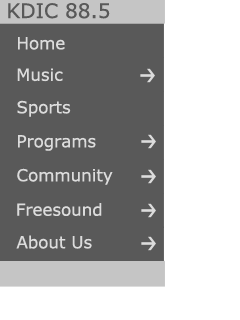
<style>
.page{position:relative;width:240px;height:320px;background:#595959}
.page>*{position:absolute;margin:0}
.t1{font:20px "Verdana";color:#595959}
.t2{font:16.7px "Verdana";color:#dcdcdc}
</style>
<div class="page">
<p class="t1" style="left:8px;top:3px;width:102px;height:16px">KDIC 88.5</p>
<p class="t2" style="left:18px;top:37px;width:47px;height:13px">Home</p>
<p class="t2" style="left:17px;top:68px;width:46px;height:14px">Music</p>
<p class="t2" style="left:17px;top:100px;width:54px;height:17px">Sports</p>
<p class="t2" style="left:18px;top:135px;width:78px;height:16px">Programs</p>
<p class="t2" style="left:17px;top:168px;width:96px;height:17px">Community</p>
<p class="t2" style="left:17px;top:203px;width:85px;height:13px">Freesound</p>
<p class="t2" style="left:16px;top:235px;width:76px;height:14px">About Us</p>
</div>
